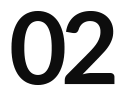
<style>
.page{position:relative;width:128px;height:96px;background:#ffffff}
.page>*{position:absolute;margin:0}
.t1{font:100px "Lato-Bold";letter-spacing:-0.06em;color:#000000;text-transform:uppercase}
</style>
<div class="page">
<p class="t1" style="left:11px;top:11px;width:104px;height:74px;opacity:0.95">02</p>
</div>
